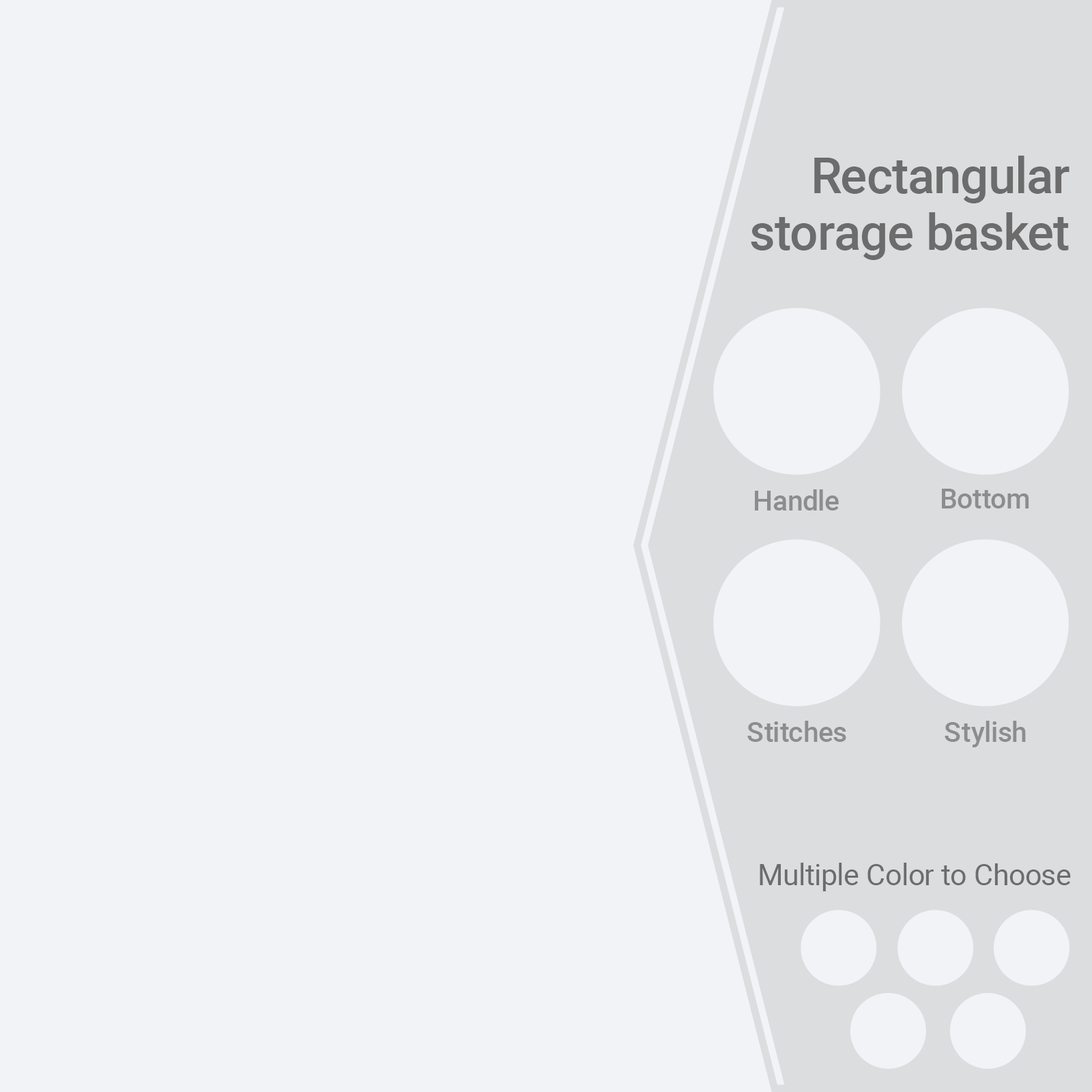
<style>
.page{position:relative;width:1092px;height:1092px;background:#f2f3f6}
.page>*{position:absolute;margin:0}
.t1{font:49.5px/56.8px "Roboto-Medium";color:#6c6c6c}
.t2{font:27.7px "Roboto-Medium";color:#8d8d8e}
.t3{font:29.1px "Roboto-Regular";color:#6c6c6c}
</style>
<div class="page">
<p class="t1" style="left:751px;top:156px;width:318px;height:104px;text-align:right">Rectangular<br>storage basket</p>
<p class="t2" style="left:755px;top:489px;width:84px;height:22px">Handle</p>
<p class="t2" style="left:942px;top:489px;width:87px;height:19px">Bottom</p>
<p class="t2" style="left:747px;top:721px;width:99px;height:21px">Stitches</p>
<p class="t2" style="left:945px;top:721px;width:81px;height:26px">Stylish</p>
<p class="t3" style="left:760px;top:863px;width:311px;height:28px">Multiple Color to Choose</p>
</div>
